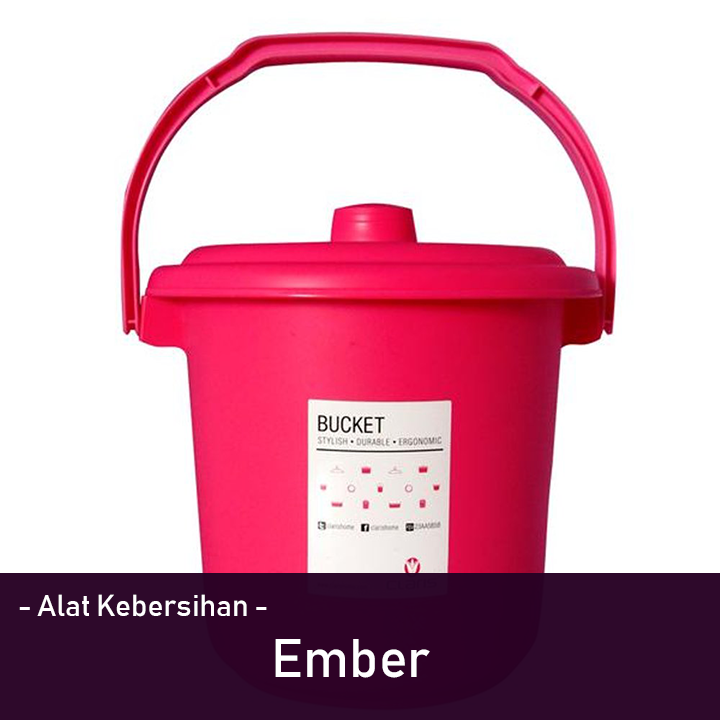
<style>
.page{position:relative;width:720px;height:720px;background:#ffffff}
.page>*{position:absolute;margin:0}
.t1{font:30px "Bahnschrift";color:#ffffff}
.t2{font:53.6px "Bahnschrift";color:#ffffff}
</style>
<div class="page">
<p class="t1" style="left:19px;top:594px;width:248px;height:23px">- Alat Kebersihan -</p>
<p class="t2" style="left:275px;top:639px;width:155px;height:39px">Ember</p>
</div>
